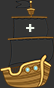
<style>
.page{position:relative;width:54px;height:88px;background:#333333}
.page>*{position:absolute;margin:0}
.t1{font:16px "ArialRoundedMTBold";color:#edf4e9}
</style>
<div class="page">
<p class="t1" style="left:26px;top:24px;width:9px;height:8px">+</p>
</div>
